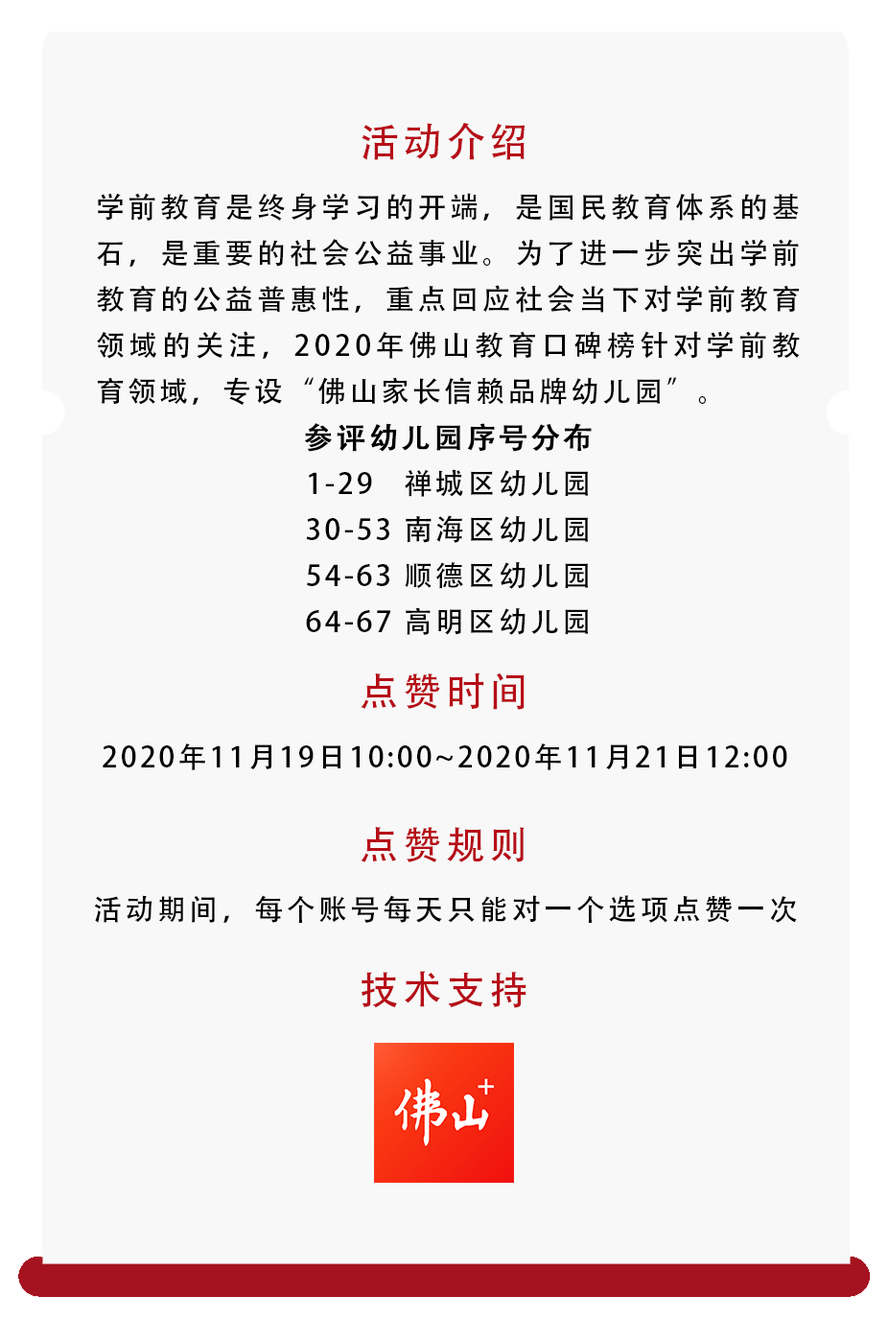
<style>
.page{position:relative;width:888px;height:1343px;background:#f8f8f8}
.page>*{position:absolute;margin:0}
.t1{font:39.1px "AdobeHeitiStd-Regular";letter-spacing:0.1em;color:#b60e18}
.t2{font:28.8px/46px "AdobeHeitiStd-Regular";letter-spacing:0.1em;color:#000000}
.t3{font:28.8px/46px "AdobeHeitiStd-Regular";letter-spacing:0.1em;color:#000000;font-weight:bold}
.t4{font:28.8px "AdobeHeitiStd-Regular";letter-spacing:0.1em;color:#000000}
</style>
<div class="page">
<p class="t1" style="left:362px;top:122px;width:163px;height:38px">活动介绍</p>
<p class="t2" style="left:97px;top:193px;width:703px;height:442px;text-align:justify">学前教育是终身学习的开端，是国民教育体系的基石，是重要的社会公益事业。为了进一步突出学前教育的公益普惠性，重点回应社会当下对学前教育领域的关注，2020年佛山教育口碑榜针对学前教育领域，专设“佛山家长信赖品牌幼儿园”。<br><span class="t3">参评幼儿园序号分布<br></span>1-2９   禅城区幼儿园<br>30-53 南海区幼儿园<br>54-63 顺德区幼儿园<br>64-67 高明区幼儿园<br>68-70三水区幼儿园</p>
<p class="t1" style="left:361px;top:672px;width:164px;height:38px">点赞时间</p>
<p class="t4" style="left:103px;top:743px;width:684px;height:27px">2020年11月19日10:00~2020年11月21日12:00</p>
<p class="t1" style="left:361px;top:827px;width:164px;height:35px">点赞规则</p>
<p class="t4" style="left:94px;top:895px;width:703px;height:28px">活动期间，每个账号每天只能对一个选项点赞一次。</p>
<p class="t1" style="left:362px;top:971px;width:165px;height:37px">技术支持</p>
</div>
